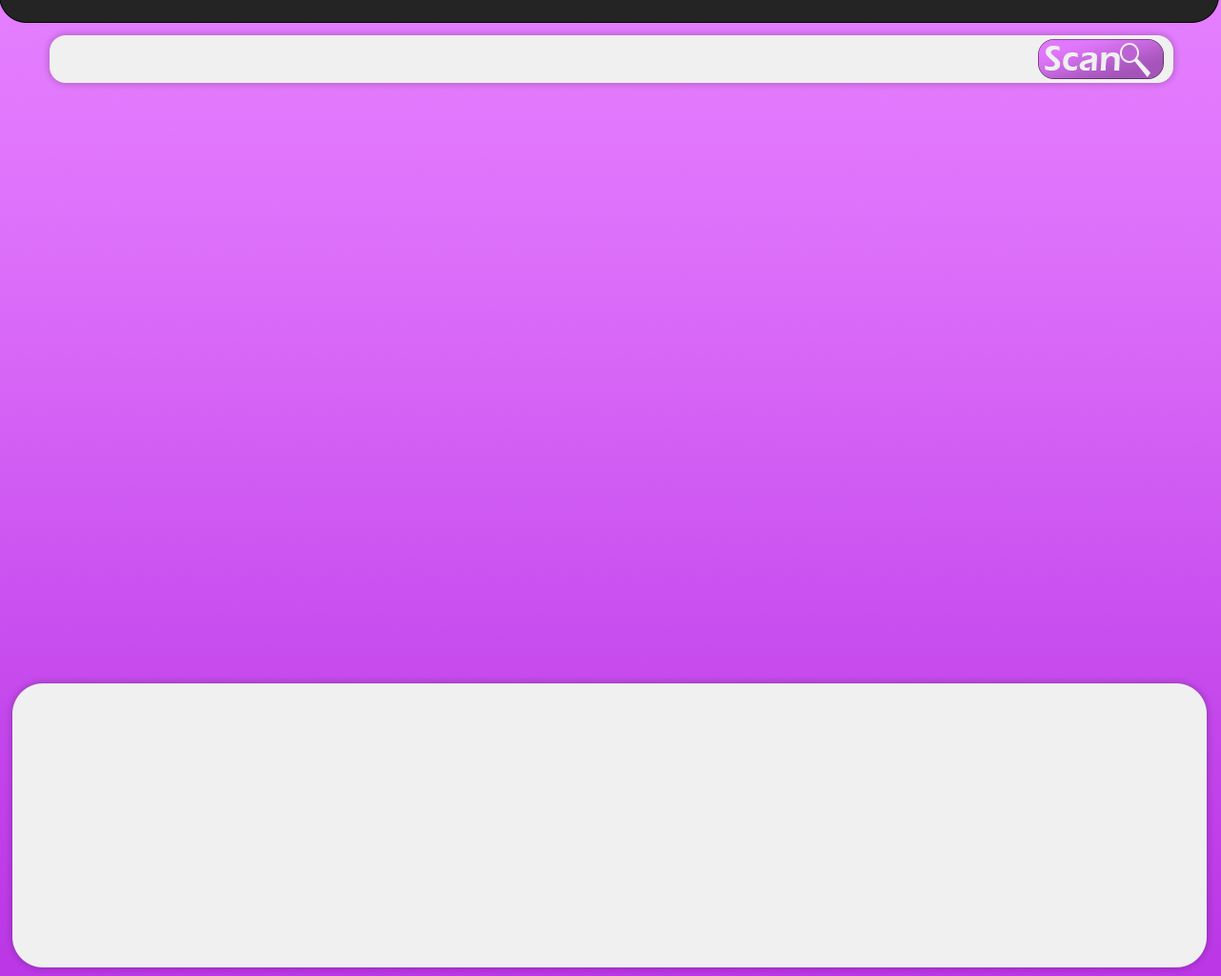
<style>
.page{position:relative;width:1221px;height:976px;background:#f0f0f0}
.page>*{position:absolute;margin:0}
.t1{font:37.6px "ErasITC-Demi";color:#f0f0f0;scale:0.94 1}
</style>
<div class="page">
<p class="t1" style="left:1045px;top:46px;width:75px;height:25px">Scan</p>
</div>
